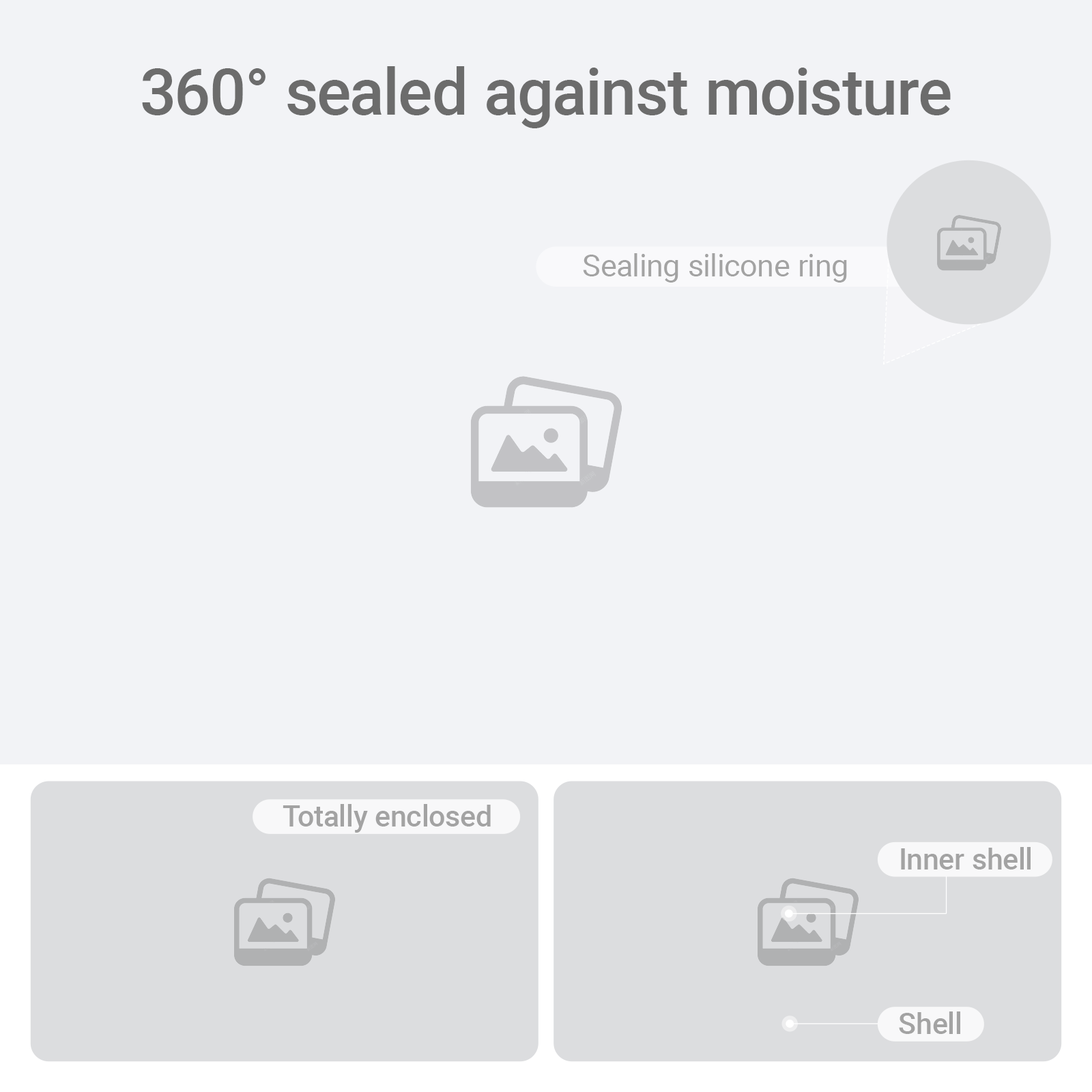
<style>
.page{position:relative;width:1092px;height:1092px;background:#f2f3f6}
.page>*{position:absolute;margin:0}
.t1{font:64.1px "Roboto-Medium";color:#6c6c6c}
.t2{font:30.6px "Roboto-Regular";color:#a3a3a3}
.t3{font:29.1px "Roboto-Medium";color:#a3a3a3}
</style>
<div class="page">
<p class="t1" style="left:142px;top:66px;width:809px;height:62px">360° sealed against moisture</p>
<p class="t2" style="left:583px;top:253px;width:264px;height:30px">Sealing silicone ring</p>
<p class="t3" style="left:283px;top:804px;width:208px;height:29px">Totally enclosed</p>
<p class="t3" style="left:901px;top:847px;width:130px;height:22px">Inner shell</p>
<p class="t3" style="left:899px;top:1011px;width:61px;height:23px">Shell</p>
</div>
